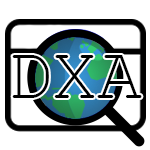
<style>
.page{position:relative;width:150px;height:150px;background:#ffffff}
.page>*{position:absolute;margin:0}
.t1{font:75.4px "CourierNewPSMT";color:#000000}
</style>
<div class="page">
<p class="t1" style="left:12px;top:55px;width:130px;height:43px">DXA</p>
</div>
